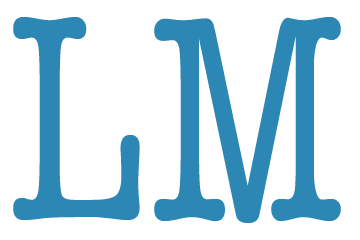
<style>
.page{position:relative;width:360px;height:240px;background:#ffffff}
.page>*{position:absolute;margin:0}
.t1{font:301.1px "AmericanTypewriter-Condensed";color:#2d87b4;scale:0.94 1}
</style>
<div class="page">
<p class="t1" style="left:13px;top:17px;width:328px;height:206px">LM</p>
</div>
